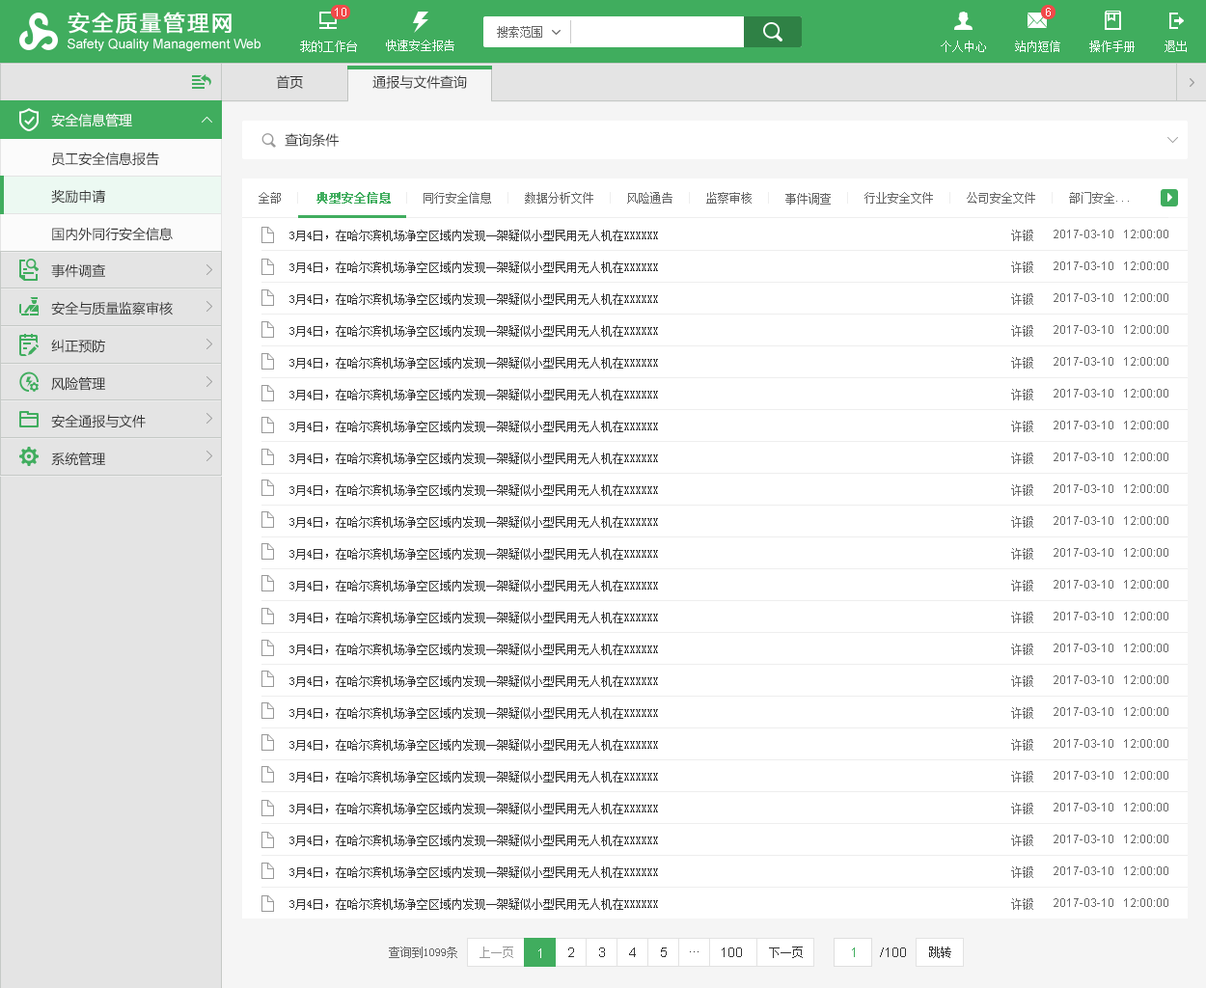
<style>
.page{position:relative;width:1206px;height:988px;background:#ffffff}
.page>*{position:absolute;margin:0}
.t1{font:13.5px "MicrosoftYaHei";color:#333333}
.t2{font:13.5px "MicrosoftYaHei";color:#ffffff}
.t3{font:13.5px/37.6px "MicrosoftYaHei";color:#333333}
.t4{font:11.6px "SimSun";color:#666666}
.t5{font:11.6px "SimSun";color:#40ad5e;font-weight:bold}
.t6{font:11.6px/31.9px "SimSun";color:#333333}
.t7{font:11.6px/31.9px "SimSun";color:#666666}
.t8{font:11.6px/31.9px "ArialMT";color:#666666}
.t9{font:11.6px "SimSun";color:#999999}
.t10{font:13.5px "ArialMT";color:#ffffff}
.t11{font:13.5px "ArialMT";color:#333333}
.t12{font:11.6px "SimSun";color:#333333}
.t13{font:13.5px "ArialMT";color:#40ad5e}
</style>
<div class="page">
<p class="t1" style="left:276px;top:75px;width:27px;height:14px">首页</p>
<p class="t1" style="left:373px;top:75px;width:94px;height:14px">通报与文件查询</p>
<p class="t2" style="left:51px;top:113px;width:81px;height:14px">安全信息管理</p>
<p class="t1" style="left:285px;top:133px;width:54px;height:14px">查询条件</p>
<p class="t3" style="left:51px;top:152px;width:122px;height:89px">员工安全信息报告<br>奖励申请<br>国内外同行安全信息</p>
<p class="t4" style="left:259px;top:192px;width:22px;height:12px">全部</p>
<p class="t5" style="left:317px;top:192px;width:74px;height:12px">典型安全信息</p>
<p class="t4" style="left:424px;top:192px;width:67px;height:12px">同行安全信息</p>
<p class="t4" style="left:525px;top:192px;width:69px;height:12px">数据分析文件</p>
<p class="t4" style="left:627px;top:192px;width:46px;height:12px">风险通告</p>
<p class="t4" style="left:707px;top:192px;width:45px;height:12px">监察审核</p>
<p class="t4" style="left:786px;top:193px;width:45px;height:12px">事件调查</p>
<p class="t4" style="left:865px;top:192px;width:68px;height:12px">行业安全文件</p>
<p class="t4" style="left:967px;top:192px;width:69px;height:12px">公司安全文件</p>
<p class="t4" style="left:1069px;top:192px;width:60px;height:12px">部门安全...</p>
<p class="t6" style="left:290px;top:230px;width:368px;height:680px">3月4日，在哈尔滨机场净空区域内发现一架疑似小型民用无人机在XXXXXX<br>3月4日，在哈尔滨机场净空区域内发现一架疑似小型民用无人机在XXXXXX<br>3月4日，在哈尔滨机场净空区域内发现一架疑似小型民用无人机在XXXXXX<br>3月4日，在哈尔滨机场净空区域内发现一架疑似小型民用无人机在XXXXXX<br>3月4日，在哈尔滨机场净空区域内发现一架疑似小型民用无人机在XXXXXX<br>3月4日，在哈尔滨机场净空区域内发现一架疑似小型民用无人机在XXXXXX<br>3月4日，在哈尔滨机场净空区域内发现一架疑似小型民用无人机在XXXXXX<br>3月4日，在哈尔滨机场净空区域内发现一架疑似小型民用无人机在XXXXXX<br>3月4日，在哈尔滨机场净空区域内发现一架疑似小型民用无人机在XXXXXX<br>3月4日，在哈尔滨机场净空区域内发现一架疑似小型民用无人机在XXXXXX<br>3月4日，在哈尔滨机场净空区域内发现一架疑似小型民用无人机在XXXXXX<br>3月4日，在哈尔滨机场净空区域内发现一架疑似小型民用无人机在XXXXXX<br>3月4日，在哈尔滨机场净空区域内发现一架疑似小型民用无人机在XXXXXX<br>3月4日，在哈尔滨机场净空区域内发现一架疑似小型民用无人机在XXXXXX<br>3月4日，在哈尔滨机场净空区域内发现一架疑似小型民用无人机在XXXXXX<br>3月4日，在哈尔滨机场净空区域内发现一架疑似小型民用无人机在XXXXXX<br>3月4日，在哈尔滨机场净空区域内发现一架疑似小型民用无人机在XXXXXX<br>3月4日，在哈尔滨机场净空区域内发现一架疑似小型民用无人机在XXXXXX<br>3月4日，在哈尔滨机场净空区域内发现一架疑似小型民用无人机在XXXXXX<br>3月4日，在哈尔滨机场净空区域内发现一架疑似小型民用无人机在XXXXXX<br>3月4日，在哈尔滨机场净空区域内发现一架疑似小型民用无人机在XXXXXX<br>3月4日，在哈尔滨机场净空区域内发现一架疑似小型民用无人机在XXXXXX</p>
<p class="t7" style="left:1012px;top:230px;width:22px;height:680px">许锻<br>许锻<br>许锻<br>许锻<br>许锻<br>许锻<br>许锻<br>许锻<br>许锻<br>许锻<br>许锻<br>许锻<br>许锻<br>许锻<br>许锻<br>许锻<br>许锻<br>许锻<br>许锻<br>许锻<br>许锻<br>许锻</p>
<p class="t8" style="left:1054px;top:230px;width:115px;height:677px">2017-03-10   12:00:00<br>2017-03-10   12:00:00<br>2017-03-10   12:00:00<br>2017-03-10   12:00:00<br>2017-03-10   12:00:00<br>2017-03-10   12:00:00<br>2017-03-10   12:00:00<br>2017-03-10   12:00:00<br>2017-03-10   12:00:00<br>2017-03-10   12:00:00<br>2017-03-10   12:00:00<br>2017-03-10   12:00:00<br>2017-03-10   12:00:00<br>2017-03-10   12:00:00<br>2017-03-10   12:00:00<br>2017-03-10   12:00:00<br>2017-03-10   12:00:00<br>2017-03-10   12:00:00<br>2017-03-10   12:00:00<br>2017-03-10   12:00:00<br>2017-03-10   12:00:00<br>2017-03-10   12:00:00</p>
<p class="t3" style="left:51px;top:263px;width:122px;height:203px">事件调查<br>安全与质量监察审核<br>纠正预防<br>风险管理<br>安全通报与文件<br>系统管理</p>
<p class="t4" style="left:389px;top:947px;width:68px;height:11px">查询到1099条</p>
<p class="t9" style="left:480px;top:947px;width:33px;height:11px">上一页</p>
<p class="t10" style="left:539px;top:949px;width:2px;height:9px">1</p>
<p class="t11" style="left:568px;top:948px;width:6px;height:9px">2</p>
<p class="t11" style="left:599px;top:948px;width:6px;height:9px">3</p>
<p class="t11" style="left:629px;top:948px;width:7px;height:9px">4</p>
<p class="t11" style="left:661px;top:948px;width:6px;height:9px">5</p>
<p class="t11" style="left:690px;top:952px;width:9px;height:1px">...</p>
<p class="t11" style="left:722px;top:948px;width:20px;height:9px">100</p>
<p class="t12" style="left:769px;top:947px;width:34px;height:11px">下一页</p>
<p class="t13" style="left:852px;top:948px;width:3px;height:9px">1</p>
<p class="t11" style="left:880px;top:948px;width:26px;height:9px">/100</p>
<p class="t12" style="left:929px;top:947px;width:23px;height:11px">跳转</p>
</div>
